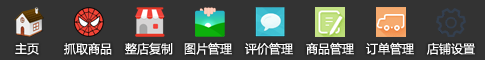
<style>
.page{position:relative;width:485px;height:60px;background:#333333}
.page>*{position:absolute;margin:0}
.t1{font:12px "MicrosoftYaHei";color:#ffffff}
</style>
<div class="page">
<p class="t1" style="left:15px;top:42px;width:24px;height:13px">主页</p>
<p class="t1" style="left:64px;top:42px;width:48px;height:13px">抓取商品</p>
<p class="t1" style="left:125px;top:42px;width:48px;height:13px">整店复制</p>
<p class="t1" style="left:184px;top:42px;width:48px;height:13px">图片管理</p>
<p class="t1" style="left:245px;top:42px;width:48px;height:13px">评价管理</p>
<p class="t1" style="left:306px;top:42px;width:48px;height:13px">商品管理</p>
<p class="t1" style="left:366px;top:42px;width:48px;height:13px">订单管理</p>
<p class="t1" style="left:427px;top:42px;width:48px;height:13px">店铺设置</p>
</div>
